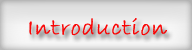
<style>
.page{position:relative;width:192px;height:50px}
.page>*{position:absolute;margin:0}
.t1{font:24px "BradleyHandITC";letter-spacing:0.025em;color:#fa0505;font-weight:bold}
</style>
<div class="page">
<p class="t1" style="left:29px;top:18px;width:138px;height:18px">Introduction</p>
</div>
